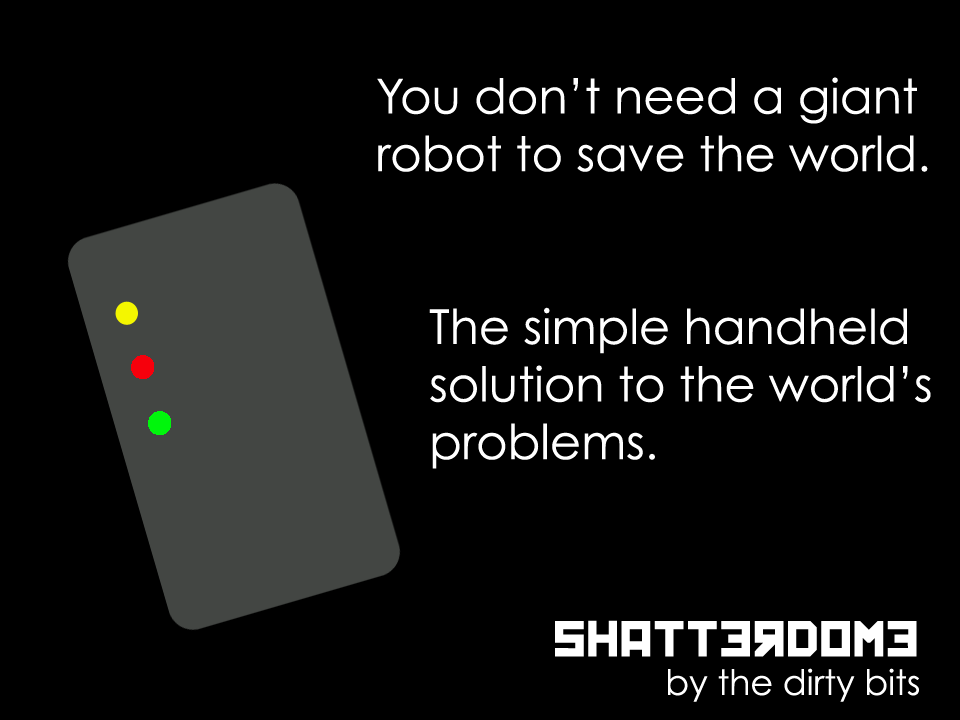
<style>
.page{position:relative;width:960px;height:720px;background:#000000}
.page>*{position:absolute;margin:0}
.t1{font:48px "CenturyGothic";color:#ffffff}
.t2{font:48px "Kremlin";color:#ffffff}
.t3{font:34.9px "CenturyGothic";color:#ffffff}
</style>
<div class="page">
<p class="t1" style="left:377px;top:77px;width:554px;height:392px">You don’t need a giant<br>robot to save the world.<br><br><br>    The simple handheld<br>    solution to the world’s<br>    problems.</p>
<p class="t2" style="left:555px;top:620px;width:362px;height:37px">shatterdome</p>
<p class="t3" style="left:668px;top:668px;width:251px;height:34px">by the dirty bits</p>
</div>
